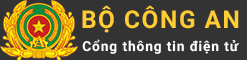
<style>
.page{position:relative;width:247px;height:60px;background:#333333}
.page>*{position:absolute;margin:0}
.t1{font:24.6px "Roboto-Bold";letter-spacing:0.06em;color:#ffcc33}
.t2{font:13.9px "Roboto-Bold";letter-spacing:0.06em;color:#ffffff}
</style>
<div class="page">
<p class="t1" style="left:82px;top:5px;width:157px;height:28px">BỘ CÔNG AN</p>
<p class="t2" style="left:82px;top:39px;width:157px;height:15px">Cổng thông tin điện tử</p>
</div>
